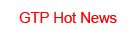
<style>
.page{position:relative;width:140px;height:40px;background:#ffffff}
.page>*{position:absolute;margin:0}
.t1{font:14.7px "ArialMT";color:#ff0000}
</style>
<div class="page">
<p class="t1" style="left:19px;top:12px;width:98px;height:11px">GTP Hot News</p>
</div>
